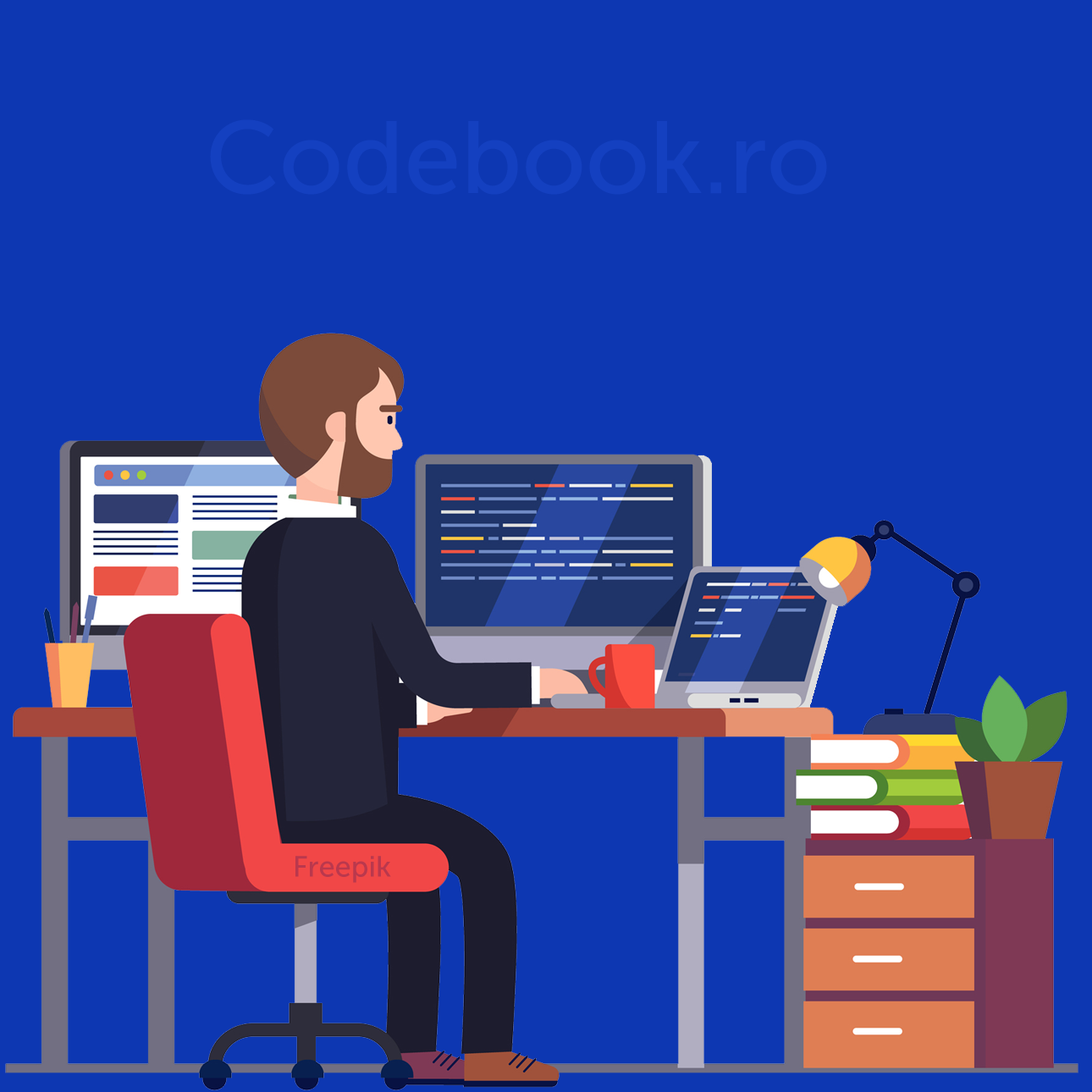
<style>
.page{position:relative;width:1092px;height:1092px;background:#0d37b2}
.page>*{position:absolute;margin:0}
.t1{font:102px "MuseoSans-500";color:#1440c0}
.t2{font:29.2px "MuseoSans-500";color:#ba384d}
</style>
<div class="page">
<p class="t1" style="left:210px;top:119px;width:617px;height:76px">Codebook.ro</p>
<p class="t2" style="left:295px;top:856px;width:96px;height:27px">Freepik</p>
</div>
